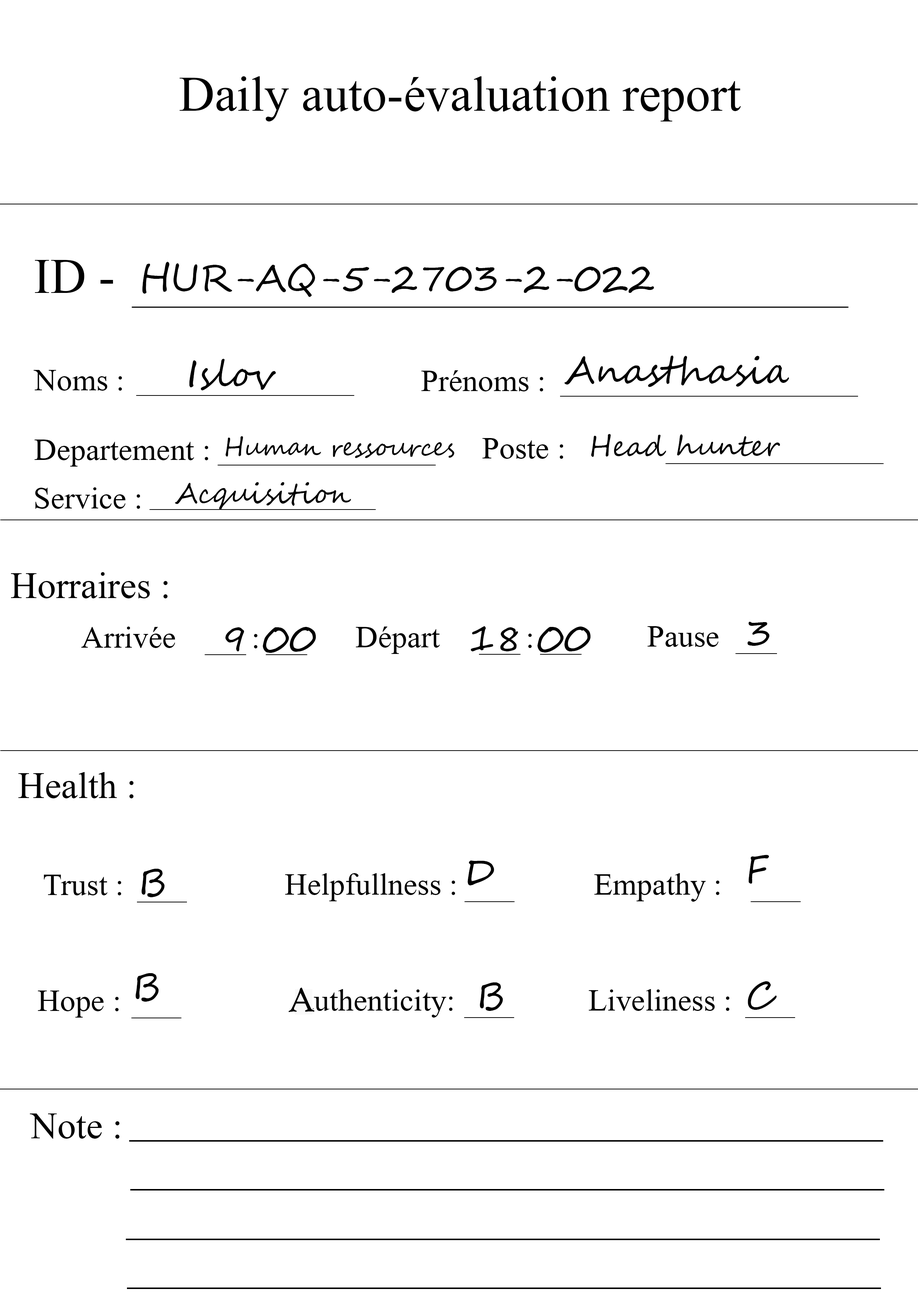
<style>
.page{position:relative;width:918px;height:1299px;background:#ffffff}
.page>*{position:absolute;margin:0}
.t1{font:74px "Microsoft-Himalaya";color:#000000}
.t2{font:37px "SegoeScript";color:#000000}
.t3{font:46.3px "Microsoft-Himalaya";color:#000000}
.t4{font:24.7px "SegoeScript";color:#000000}
.t5{font:27.8px "SegoeScript";color:#000000}
.t6{font:55.5px "Microsoft-Himalaya";color:#000000}
.t7{font:37px "HighTowerText-Reg";color:#000000}
</style>
<div class="page">
<p class="t1" style="left:180px;top:76px;width:561px;height:45px">Daily auto-évaluation report</p>
<p class="t1" style="left:35px;top:260px;width:78px;height:33px">ID -</p>
<p class="t2" style="left:142px;top:262px;width:512px;height:35px">HUR-AQ-5-2703-2-022</p>
<p class="t2" style="left:189px;top:359px;width:87px;height:32px">Islov</p>
<p class="t2" style="left:565px;top:355px;width:224px;height:32px">Anasthasia</p>
<p class="t3" style="left:34px;top:370px;width:88px;height:21px">Noms :</p>
<p class="t3" style="left:421px;top:370px;width:122px;height:21px">Prénoms :</p>
<p class="t4" style="left:225px;top:436px;width:230px;height:22px">Human ressources</p>
<p class="t3" style="left:482px;top:438px;width:81px;height:21px">Poste :</p>
<p class="t5" style="left:591px;top:434px;width:189px;height:23px">Head hunter</p>
<p class="t3" style="left:34px;top:439px;width:174px;height:27px">Departement :</p>
<p class="t5" style="left:175px;top:482px;width:176px;height:28px">Acquisition</p>
<p class="t3" style="left:35px;top:487px;width:105px;height:22px">Service :</p>
<p class="t6" style="left:11px;top:572px;width:157px;height:26px">Horraires :</p>
<p class="t3" style="left:81px;top:626px;width:94px;height:22px">Arrivée</p>
<p class="t2" style="left:225px;top:627px;width:91px;height:26px">9 00</p>
<p class="t3" style="left:356px;top:626px;width:84px;height:28px">Départ</p>
<p class="t2" style="left:471px;top:626px;width:120px;height:26px">18 00</p>
<p class="t3" style="left:648px;top:626px;width:71px;height:21px">Pause</p>
<p class="t2" style="left:747px;top:622px;width:23px;height:24px">3</p>
<p class="t3" style="left:254px;top:634px;width:4px;height:14px">:</p>
<p class="t3" style="left:528px;top:633px;width:4px;height:15px">:</p>
<p class="t6" style="left:18px;top:772px;width:116px;height:26px">Health :</p>
<p class="t2" style="left:749px;top:854px;width:20px;height:30px">F</p>
<p class="t2" style="left:141px;top:869px;width:24px;height:28px">B</p>
<p class="t2" style="left:468px;top:860px;width:26px;height:25px">D</p>
<p class="t3" style="left:44px;top:874px;width:77px;height:21px">Trust :</p>
<p class="t3" style="left:285px;top:873px;width:170px;height:28px">Helpfullness :</p>
<p class="t3" style="left:594px;top:873px;width:126px;height:28px">Empathy :</p>
<p class="t2" style="left:136px;top:973px;width:23px;height:28px">B</p>
<p class="t7" style="left:288px;top:987px;width:27px;height:25px">A</p>
<p class="t3" style="left:301px;top:989px;width:152px;height:28px">authenticity:</p>
<p class="t2" style="left:480px;top:982px;width:23px;height:29px">B</p>
<p class="t3" style="left:589px;top:989px;width:141px;height:22px">Liveliness :</p>
<p class="t2" style="left:748px;top:981px;width:29px;height:29px">C</p>
<p class="t3" style="left:38px;top:990px;width:81px;height:27px">Hope :</p>
<p class="t6" style="left:30px;top:1113px;width:90px;height:25px">Note :</p>
</div>
